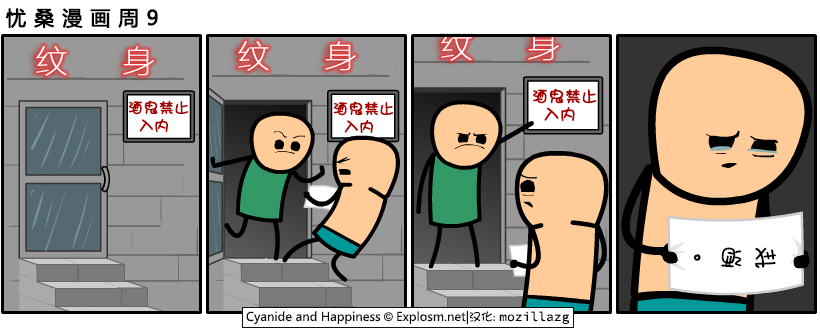
<style>
.page{position:relative;width:820px;height:330px;background:#999999}
.page>*{position:absolute;margin:0}
.t1{font:20px "MicrosoftYaHei";letter-spacing:0.38em;color:#000000;font-weight:bold}
.t2{font:32px "FZLTCXHJW--GB1-0";letter-spacing:0.7em;color:#ffffff;font-weight:bold}
.t3{font:16px/18px "DFGirl";color:#a70101;font-weight:bold}
.t4{font:15px/18px "DFGirl";color:#a70101;font-weight:bold}
.t5{font:23.7px "DFGirl";letter-spacing:0.42em;color:#000000}
</style>
<div class="page">
<p class="t1" style="left:6px;top:8px;width:152px;height:21px">忧桑漫画周9</p>
<p class="t2" style="left:238px;top:41px;width:118px;height:30px">纹 身</p>
<p class="t2" style="left:441px;top:31px;width:118px;height:30px">纹 身</p>
<p class="t2" style="left:36px;top:46px;width:118px;height:30px">纹 身</p>
<p class="t3" style="left:533px;top:88px;width:64px;height:34px">酒鬼禁止<br>  入内</p>
<p class="t4" style="left:128px;top:100px;width:61px;height:33px">酒鬼禁止<br>  入内</p>
<p class="t4" style="left:333px;top:101px;width:61px;height:33px">酒鬼禁止<br>  入内</p>
<p class="t5" style="left:693px;top:247px;width:83px;height:21px;rotate:180deg">戒酒。</p>
</div>
